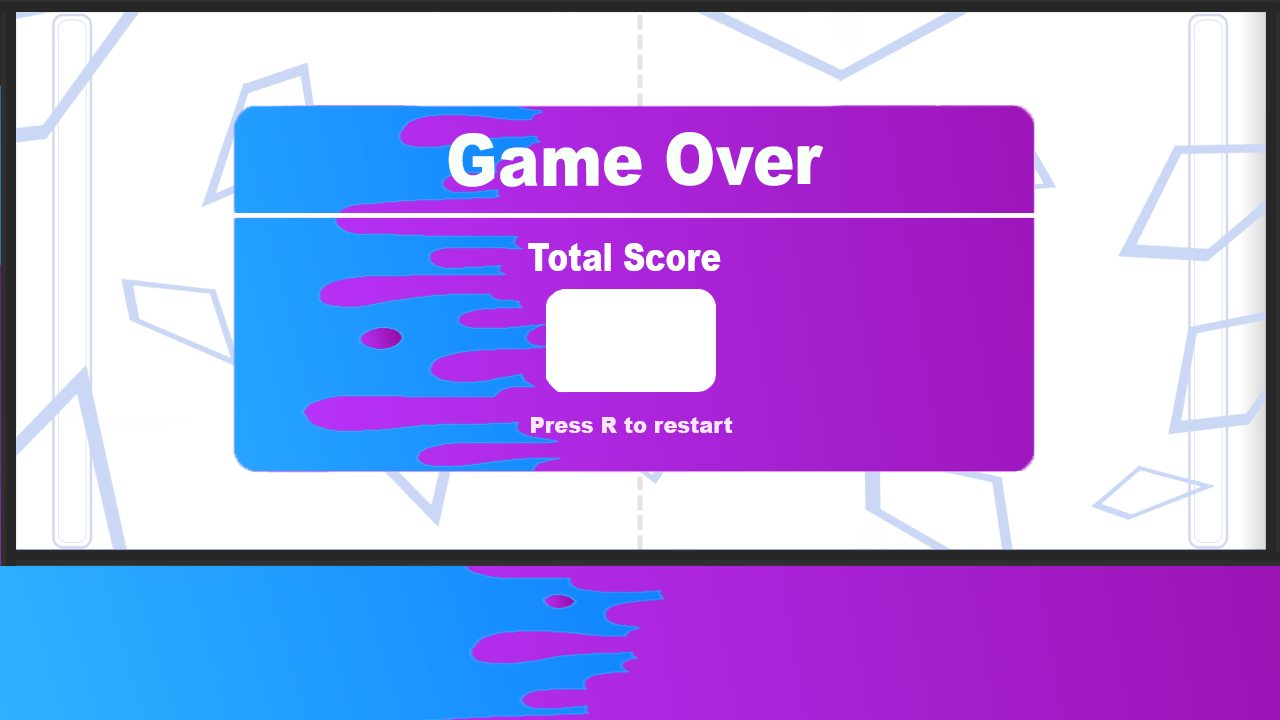
<style>
.page{position:relative;width:1280px;height:720px;background:#ffffff}
.page>*{position:absolute;margin:0}
.t1{font:72.6px "Arial-Black";color:#f9fff9;scale:0.86 1}
.t2{font:38.8px "Arial-Black";color:#ffffff;scale:0.79 1}
.t3{font:22px "Arial-Black";color:#ffe8ff;scale:0.95 1}
</style>
<div class="page">
<p class="t1" style="left:448px;top:132px;width:375px;height:55px">Game Over</p>
<p class="t2" style="left:528px;top:243px;width:193px;height:28px">Total Score</p>
<p class="t3" style="left:531px;top:417px;width:202px;height:16px">Press R to restart</p>
</div>
